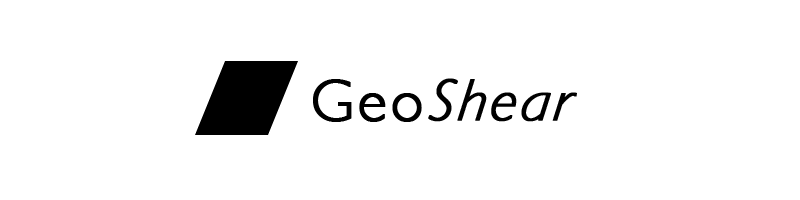
<style>
.page{position:relative;width:800px;height:200px;background:#ffffff}
.page>*{position:absolute;margin:0}
.t1{font:60px "GillSans-LightItalic";letter-spacing:0.04em;color:#000000;font-weight:bold;font-style:italic}
.t2{font:60px "GillSans-Light";letter-spacing:0.04em;color:#000000;font-weight:bold}
</style>
<div class="page">
<p class="t1" style="left:313px;top:78px;width:264px;height:44px"><span class="t2">Geo</span>Shear</p>
</div>
